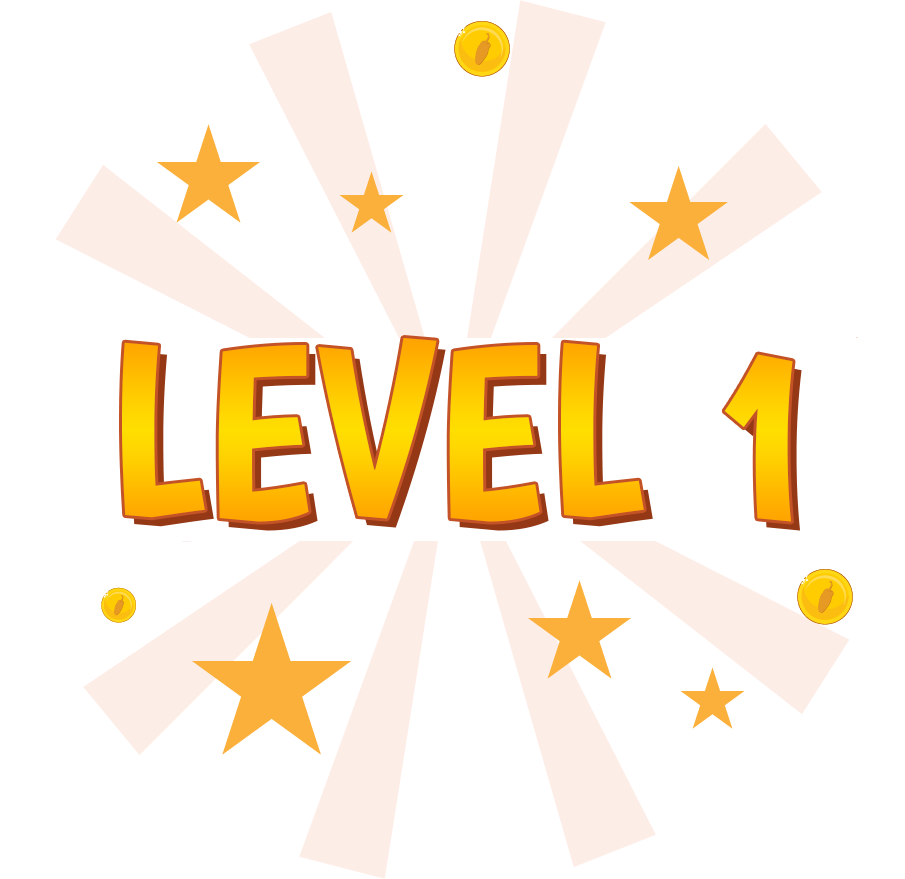
<style>
.page{position:relative;width:905px;height:879px;background:#ffffff}
.page>*{position:absolute;margin:0}
.t1{font:249.9px "Boogaloo-Regular";color:#ffc700}
</style>
<div class="page">
<p class="t1" style="left:122px;top:338px;width:671px;height:184px">LEVEL 1</p>
</div>
